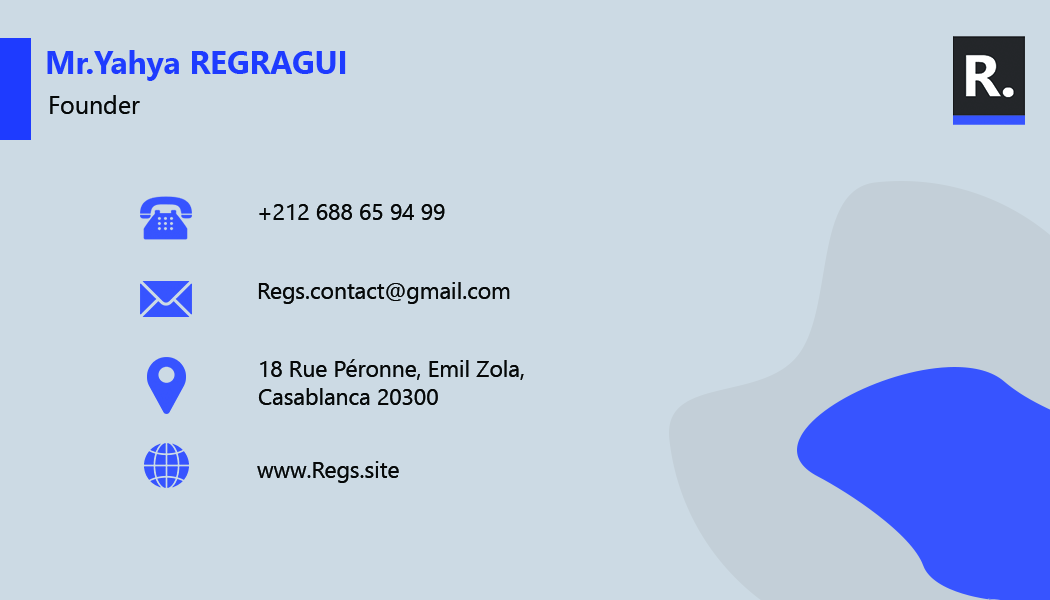
<style>
.page{position:relative;width:1050px;height:600px;background:#ccdae4}
.page>*{position:absolute;margin:0}
.t1{font:31.7px "SegoeUI-Bold";color:#1e3bff}
.t2{font:25px "SegoeUI";color:#060808}
.t3{font:22.8px "SegoeUI";color:#060808}
</style>
<div class="page">
<p class="t1" style="left:47px;top:50px;width:299px;height:31px">Mr.Yahya REGRAGUI</p>
<p class="t2" style="left:50px;top:95px;width:90px;height:19px">Founder</p>
<p class="t3" style="left:259px;top:204px;width:186px;height:16px">+212 688 65 94 99</p>
<p class="t3" style="left:258px;top:282px;width:252px;height:22px">Regs.contact@gmail.com</p>
<p class="t3" style="left:258px;top:359px;width:266px;height:46px">18 Rue Péronne, Emil Zola,<br>Casablanca 20300</p>
<p class="t3" style="left:257px;top:461px;width:142px;height:22px">www.Regs.site</p>
</div>
